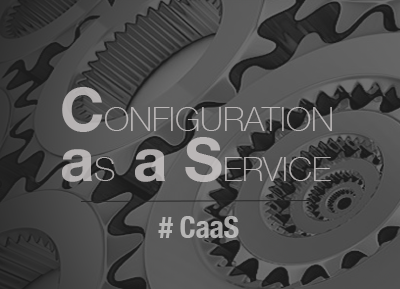
<style>
.page{position:relative;width:400px;height:289px}
.page>*{position:absolute;margin:0}
.t1{font:34px/50px "HelveticaNeue-Thin";color:#b7b4b4}
.t2{font:60px/50px "HelveticaNeue-Bold";color:#b7b4b4}
.t3{font:30px "HelveticaNeue-CondensedBold";color:#b6b5b5}
</style>
<div class="page">
<p class="t1" style="left:62px;top:87px;width:270px;height:95px"><span class="t2">C</span>ONFIGURATION<br><span class="t2">a</span>S  <span class="t2">a S</span>ERVICE</p>
<p class="t3" style="left:158px;top:216px;width:81px;height:22px"># CaaS</p>
</div>
